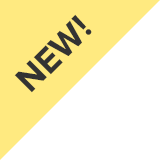
<style>
.page{position:relative;width:160px;height:160px;background:#ffffff}
.page>*{position:absolute;margin:0}
.t1{font:36px "ProximaNova-Bold";color:#333333}
</style>
<div class="page">
<p class="t1" style="left:14px;top:14px;width:78px;height:79px;rotate:-45deg">NEW!</p>
</div>
